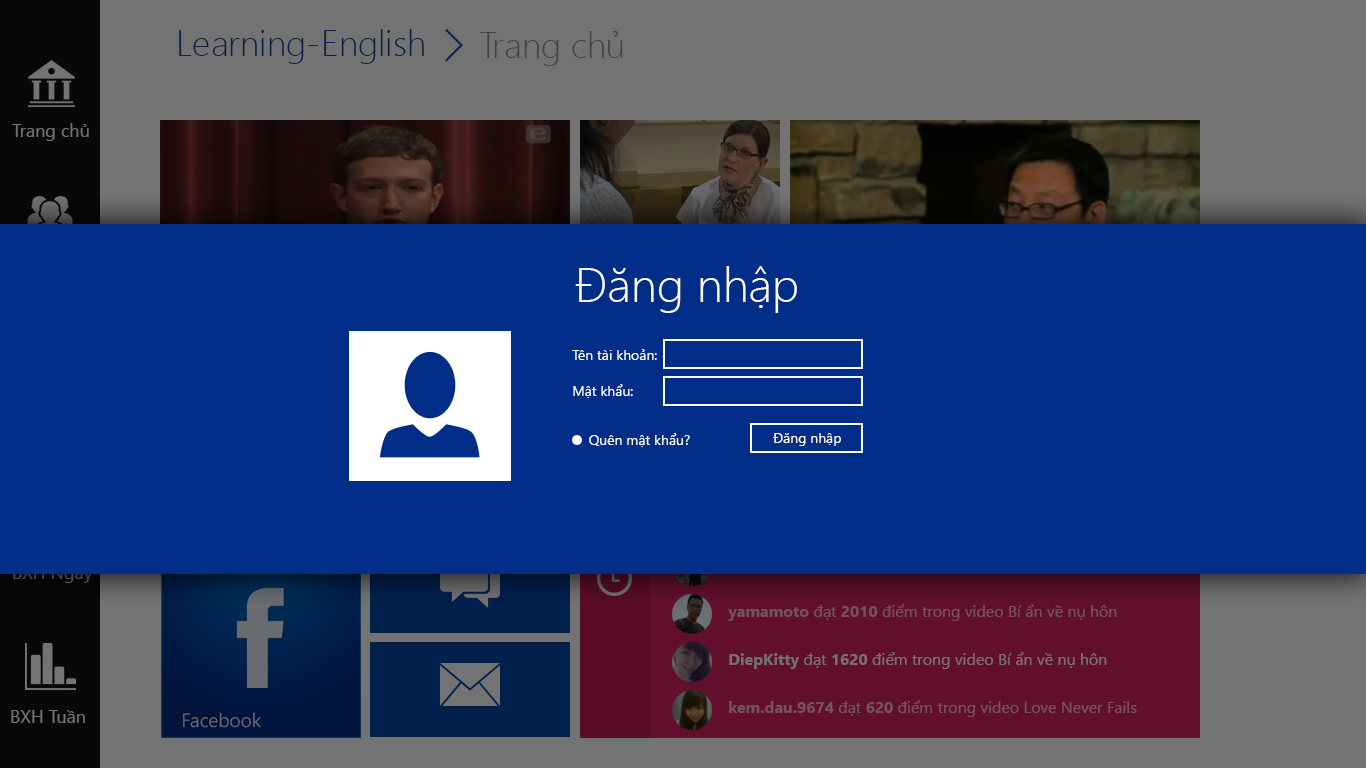
<style>
.page{position:relative;width:1366px;height:768px;background:#002d87}
.page>*{position:absolute;margin:0}
.t1{font:36px "SegoeUI-Light";color:#0a2145}
.t2{font:36px "SegoeUI-Light";color:#444445}
.t3{font:18px "SegoeUI";color:#737373}
.t4{font:48px "SegoeUI-Light";color:#ffffff}
.t5{font:14px/18px "SegoeUI";color:#ffffff}
.t6{font:14px "SegoeUI";color:#ffffff}
.t7{font:16px/24px "SegoeUI"}
.t8{font:16px/24px "SegoeUI-Bold"}
.t9{font:18px "SegoeUI"}
</style>
<div class="page">
<p class="t1" style="left:179px;top:29px;width:245px;height:35px">Learning-English</p>
<p class="t2" style="left:480px;top:31px;width:143px;height:35px">Trang chủ</p>
<p class="t3" style="left:12px;top:123px;width:77px;height:18px">Trang chủ</p>
<p class="t4" style="left:575px;top:266px;width:222px;height:47px">Đăng nhập</p>
<p class="t5" style="left:572px;top:349px;width:85px;height:49px;text-align:right">Tên tài khoản:<br><br>Mật khẩu:</p>
<p class="t6" style="left:589px;top:433px;width:101px;height:14px">Quên mật khẩu?</p>
<p class="t6" style="left:773px;top:433px;width:68px;height:13px">Đăng nhập</p>
<p class="t7" style="left:728px;top:556px;width:435px;height:161px;text-align:right"><span class="t8">Blackdemon94 </span>đạt <span class="t8">1300</span> điểm trong video Lịch sử tiến hóa ...<br><br><span class="t8">yamamoto </span>đạt <span class="t8">2010 </span>điểm trong video Bí ẩn về nụ hôn<br><br><span class="t8">DiepKitty </span>đạt <span class="t8">1620 </span>điểm trong video Bí ẩn về nụ hôn<br><br><span class="t8">kem.dau.9674 </span>đạt <span class="t8">620 </span>điểm trong video Love Never Fails</p>
<p class="t9" style="left:13px;top:566px;width:80px;height:17px">BXH Ngày</p>
<p class="t3" style="left:11px;top:710px;width:74px;height:13px">BXH Tuần</p>
</div>
